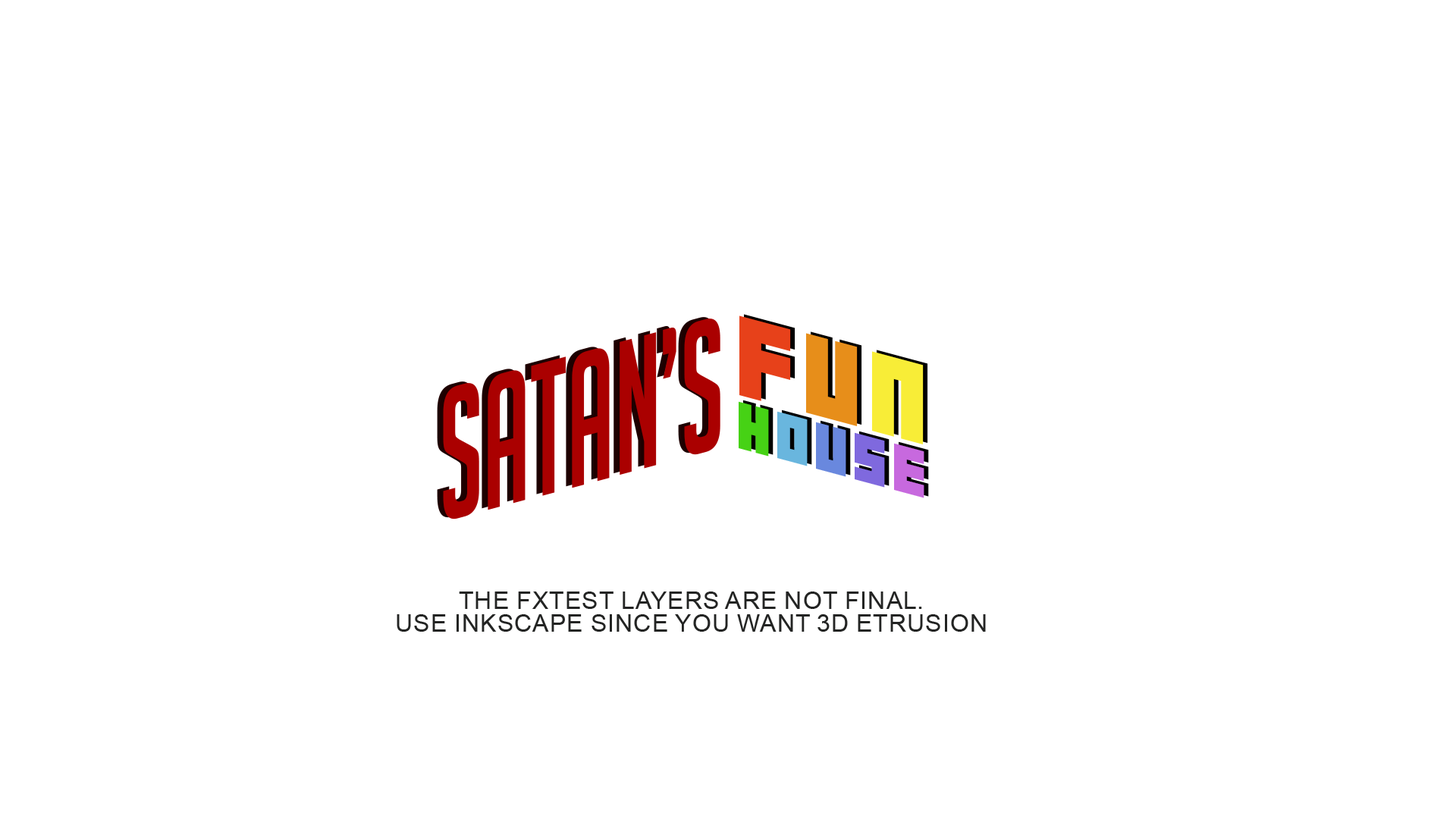
<style>
.page{position:relative;width:1456px;height:819px;background:#ffffff}
.page>*{position:absolute;margin:0}
.t1{font:100.9px/53.1px "04b19";letter-spacing:0.08em;color:#e7411a;text-transform:uppercase;scale:1.04 1}
.t2{font:100.9px/53.1px "04b19";letter-spacing:0.08em;color:#e78e1a;text-transform:uppercase;scale:1.04 1}
.t3{font:100.9px/53.1px "04b19";letter-spacing:0.08em;color:#f8ed37;text-transform:uppercase;scale:1.04 1}
.t4{font:59.1px/53.1px "04b19";letter-spacing:0.08em;color:#46d215;text-transform:uppercase;scale:1.04 1}
.t5{font:59.1px/53.1px "04b19";letter-spacing:0.08em;color:#69b6de;text-transform:uppercase;scale:1.04 1}
.t6{font:59.1px/53.1px "04b19";letter-spacing:0.08em;color:#6988de;text-transform:uppercase;scale:1.04 1}
.t7{font:59.1px/53.1px "04b19";letter-spacing:0.08em;color:#7f69de;text-transform:uppercase;scale:1.04 1}
.t8{font:59.1px/53.1px "04b19";letter-spacing:0.08em;color:#c769de;text-transform:uppercase;scale:1.04 1}
.t9{font:184.9px "BigNoodleTitling";color:#aa0000;text-transform:uppercase;scale:0.69 1}
.t10{font:24.3px/23.1px "ArialMT";color:#232423;text-transform:uppercase}
</style>
<div class="page">
<p class="t1" style="left:739px;top:315px;width:185px;height:183px;text-align:center;rotate:15deg">f<span class="t2">u</span><span class="t3">n<br></span><span class="t4">h</span><span class="t5">o</span><span class="t6">u</span><span class="t7">s</span><span class="t8">e</span></p>
<p class="t9" style="left:443px;top:318px;width:277px;height:201px;rotate:-15deg">SATAN’S</p>
<p class="t10" style="left:397px;top:591px;width:589px;height:41px;text-align:center">The FXTest layers are not final.<br>Use Inkscape since you want 3D etrusion</p>
</div>
